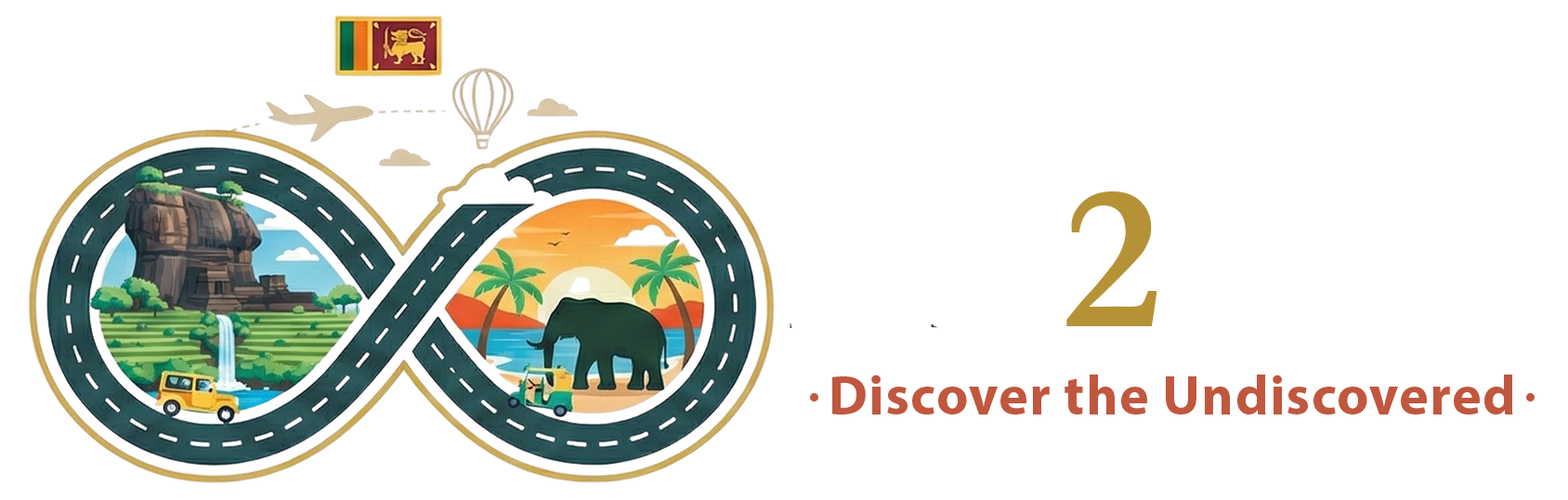
<style>
.page{position:relative;width:1568px;height:500px;background:#ffffff}
.page>*{position:absolute;margin:0}
.t1{font:209px "Garamond-Bold";letter-spacing:-0.05em;color:#b69236}
.t2{font:55.7px "MyriadPro-Bold";letter-spacing:0.02em;color:#c0573e}
</style>
<div class="page">
<p class="t1" style="left:1066px;top:191px;width:91px;height:135px">2</p>
<p class="t2" style="left:832px;top:374px;width:681px;height:40px">Discover the Undiscovered</p>
</div>
